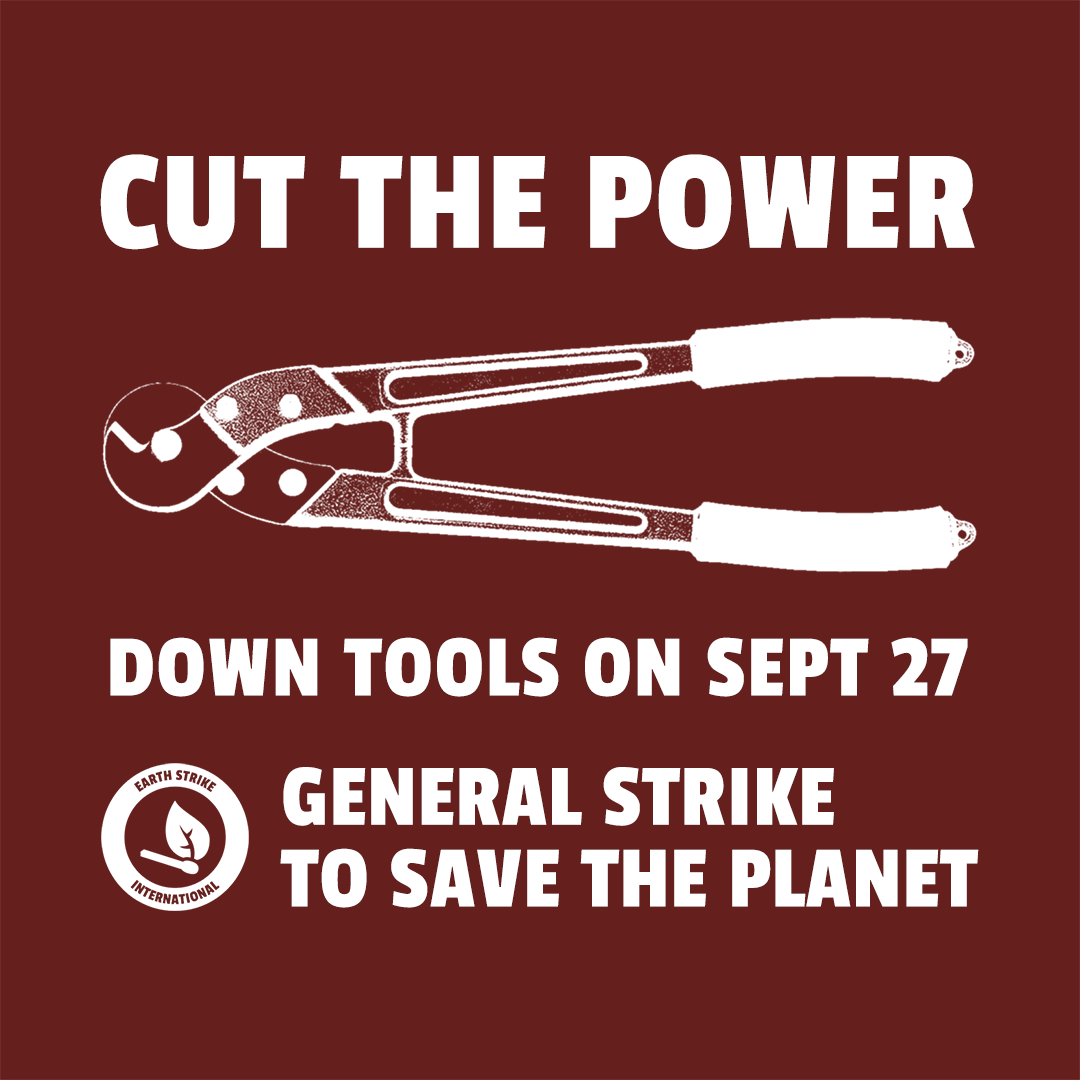
<style>
.page{position:relative;width:1080px;height:1080px;background:#65201d}
.page>*{position:absolute;margin:0}
.t1{font:147.4px "PassionOne-Regular";letter-spacing:0.02em;color:#ffffff;text-transform:uppercase}
.t2{font:91.6px "PassionOne-Regular";letter-spacing:0.02em;color:#ffffff;text-transform:uppercase}
.t3{font:91.6px/81.7px "PassionOne-Regular";letter-spacing:0.01em;color:#ffffff}
</style>
<div class="page">
<p class="t1" style="left:100px;top:154px;width:875px;height:96px">CUT THE POWER</p>
<p class="t2" style="left:110px;top:637px;width:858px;height:60px">down tools on sept 27</p>
<p class="t3" style="left:280px;top:767px;width:699px;height:141px">GENERAL STRIKE<br>TO SAVE THE PLANET</p>
</div>
